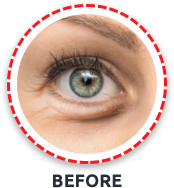
<style>
.page{position:relative;width:174px;height:188px;background:#ffffff}
.page>*{position:absolute;margin:0}
.t1{font:18px "Ubuntu-Bold";color:#272d39;text-transform:uppercase}
</style>
<div class="page">
<p class="t1" style="left:53px;top:174px;width:69px;height:14px">BEFORE</p>
</div>
